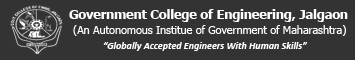
<style>
.page{position:relative;width:355px;height:60px;background:#333333}
.page>*{position:absolute;margin:0}
.t1{font:12.5px "Tahoma-Bold";color:#ffffff}
.t2{font:10.8px "Tahoma";color:#ffffff}
.t3{font:10px "Calibri-BoldItalic";color:#ffffff}
</style>
<div class="page">
<p class="t1" style="left:69px;top:9px;width:279px;height:13px">Government College of Engineering, Jalgaon</p>
<p class="t2" style="left:73px;top:25px;width:273px;height:11px">(An Autonomous Institue of Government of Maharashtra)</p>
<p class="t3" style="left:103px;top:42px;width:205px;height:9px">“Globally Accepted Engineers With Human Skills”</p>
</div>
